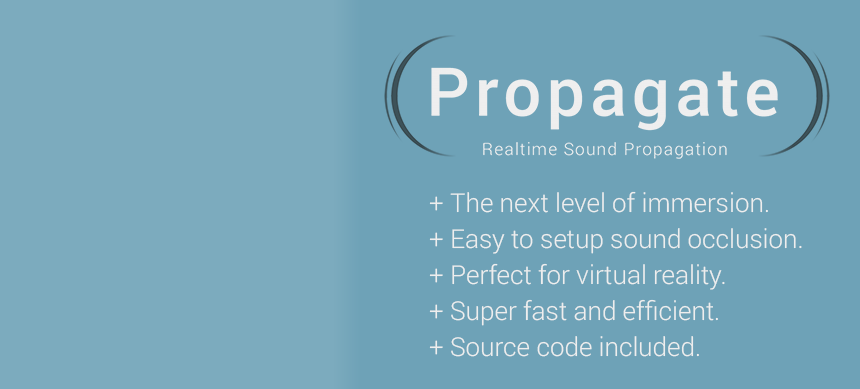
<style>
.page{position:relative;width:860px;height:389px;background:#6ea2b7}
.page>*{position:absolute;margin:0}
.t1{font:26px/36px "Roboto-Light";color:#efefef}
</style>
<div class="page">
<p class="t1" style="left:429px;top:191px;width:373px;height:166px">+ The next level of immersion.<br>+ Easy to setup sound occlusion.<br>+ Perfect for virtual reality.<br>+ Super fast and efficient.<br>+ Source code included.</p>
</div>
